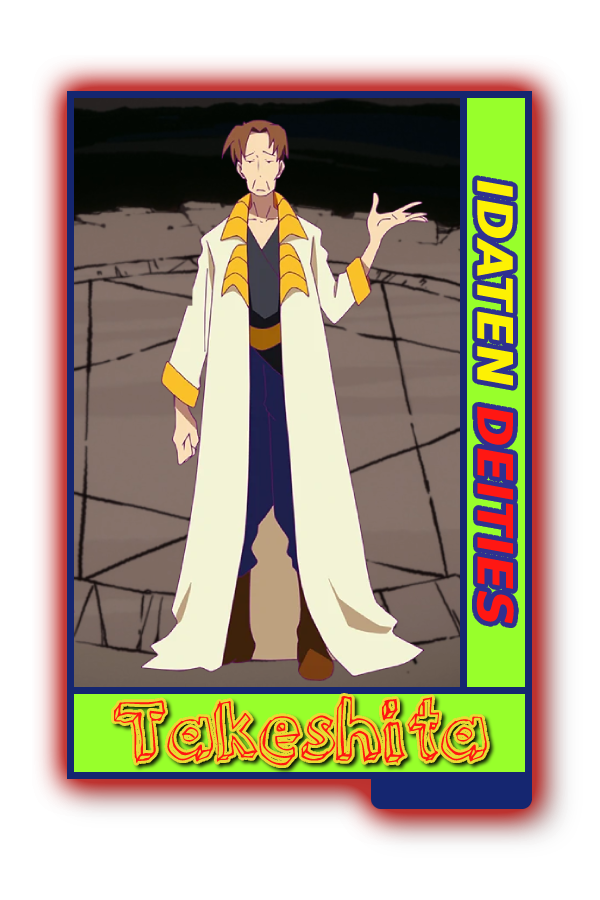
<style>
.page{position:relative;width:600px;height:900px;background:#ffffff}
.page>*{position:absolute;margin:0}
.t1{font:48.8px "MADETOMMY-Bold";color:#ff1713;font-weight:bold;font-style:italic}
.t2{font:48.8px "MADETOMMY-Bold";color:#fdf103;font-weight:bold;font-style:italic}
.t3{font:75px "3dumb";color:#ff1611}
</style>
<div class="page">
<p class="t1" style="left:476px;top:180px;width:38px;height:444px;rotate:90deg"><span class="t2">IDATEN </span>DEITIES</p>
<p class="t3" style="left:113px;top:695px;width:374px;height:71px">Takeshita</p>
</div>
